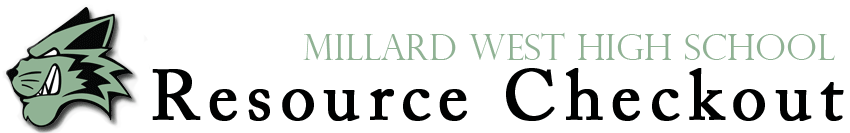
<style>
.page{position:relative;width:850px;height:133px;background:#ffffff}
.page>*{position:absolute;margin:0}
.t1{font:36px "PerpetuaTitlingMT-Light";color:#90b294}
.t2{font:70px "ACaslonPro-Regular";letter-spacing:0.1em;color:#000101;font-weight:bold}
</style>
<div class="page">
<p class="t1" style="left:303px;top:32px;width:532px;height:28px">Millard West High School</p>
<p class="t2" style="left:152px;top:68px;width:692px;height:53px">Resource Checkout</p>
</div>
